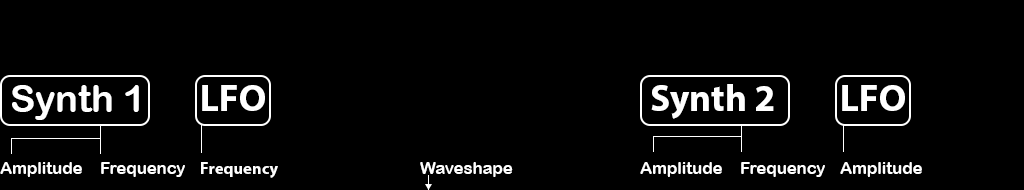
<style>
.page{position:relative;width:1024px;height:190px;background:#000000}
.page>*{position:absolute;margin:0}
.t1{font:37.5px "ArialRoundedMTBold";color:#ffffff}
.t2{font:37.5px "MyriadPro-Bold";color:#ffffff}
.t3{font:16.7px "ArialRoundedMTBold";color:#ffffff}
.t4{font:16.7px "MyriadPro-Bold";color:#ffffff}
</style>
<div class="page">
<p class="t1" style="left:12px;top:85px;width:127px;height:35px">Synth 1</p>
<p class="t2" style="left:202px;top:85px;width:63px;height:26px">LFO</p>
<p class="t2" style="left:651px;top:84px;width:123px;height:35px">Synth 2</p>
<p class="t2" style="left:842px;top:85px;width:63px;height:26px">LFO</p>
<p class="t3" style="left:0px;top:162px;width:82px;height:15px">Amplitude</p>
<p class="t3" style="left:101px;top:162px;width:84px;height:15px">Frequency</p>
<p class="t4" style="left:201px;top:162px;width:77px;height:16px">Frequency</p>
<p class="t3" style="left:420px;top:162px;width:93px;height:15px">Waveshape</p>
<p class="t3" style="left:640px;top:162px;width:82px;height:15px">Amplitude</p>
<p class="t3" style="left:741px;top:162px;width:84px;height:15px">Frequency</p>
<p class="t3" style="left:840px;top:162px;width:82px;height:15px">Amplitude</p>
</div>
